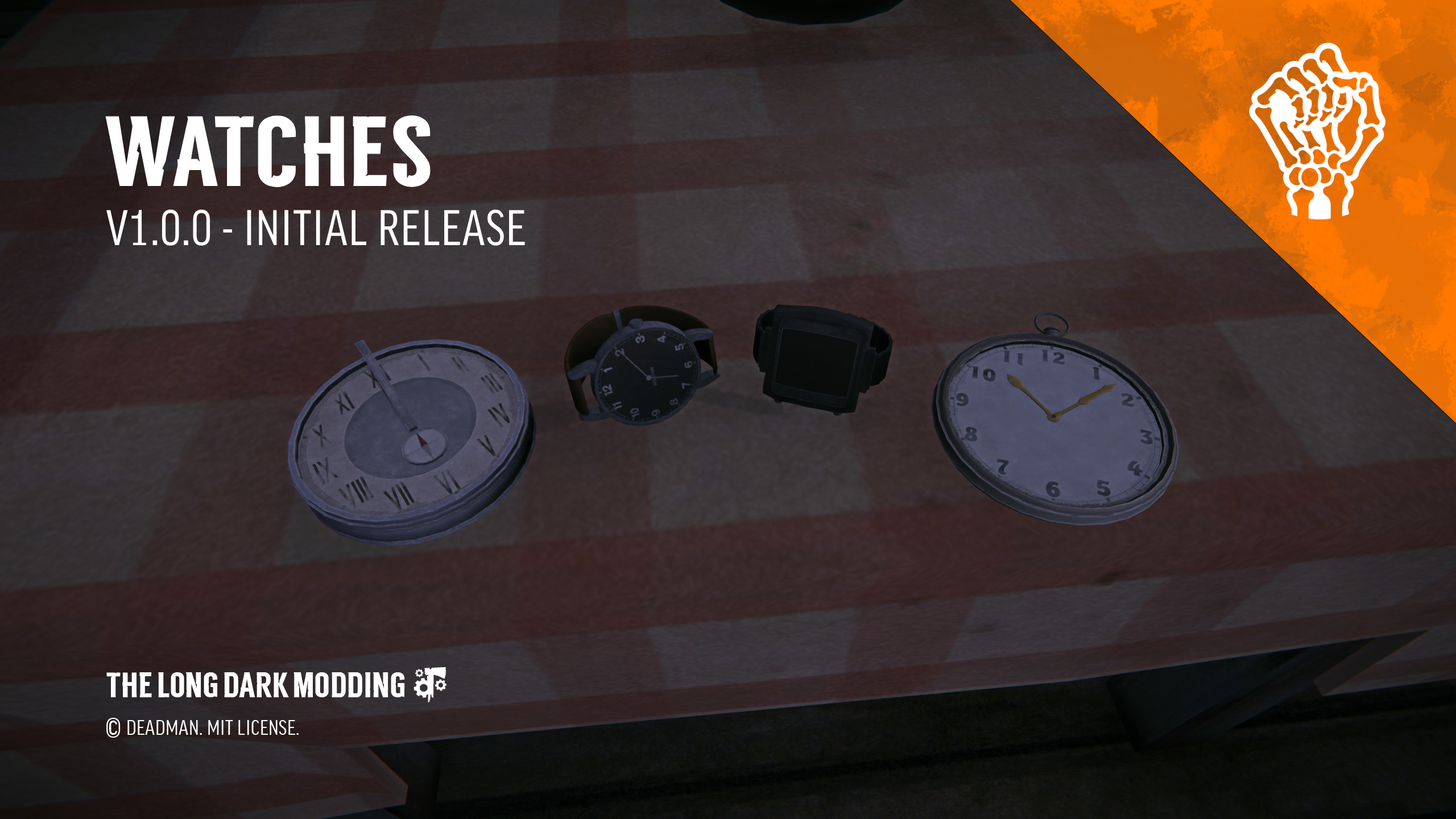
<style>
.page{position:relative;width:1456px;height:819px}
.page>*{position:absolute;margin:0}
.t1{font:99.5px "TLD_Headline_One_Test1.5";letter-spacing:0.01em;color:#ffffff}
.t2{font:48.3px "FFGoodProCond-News";letter-spacing:0.02em;color:#ffffff}
.t3{font:35.3px "TLD_Headline_One_Test1.5";letter-spacing:0.004em;color:#ffffff}
.t4{font:27.3px "FFGoodProCond-News";letter-spacing:0.015em;color:#ffffff}
.t5{font:20.5px "FFGoodProCond-News";letter-spacing:0.015em;color:#ffffff}
</style>
<div class="page">
<p class="t1" style="left:105px;top:115px;width:326px;height:72px">WATCHES</p>
<p class="t2" style="left:106px;top:209px;width:419px;height:37px">V1.0.0 - INITIAL RELEASE</p>
<p class="t3" style="left:106px;top:672px;width:299px;height:25px">THE LONG DARK MODDING</p>
<p class="t4" style="left:106px;top:718px;width:15px;height:20px">©</p>
<p class="t5" style="left:127px;top:720px;width:172px;height:15px">DEADMAN. MIT LICENSE.</p>
</div>
